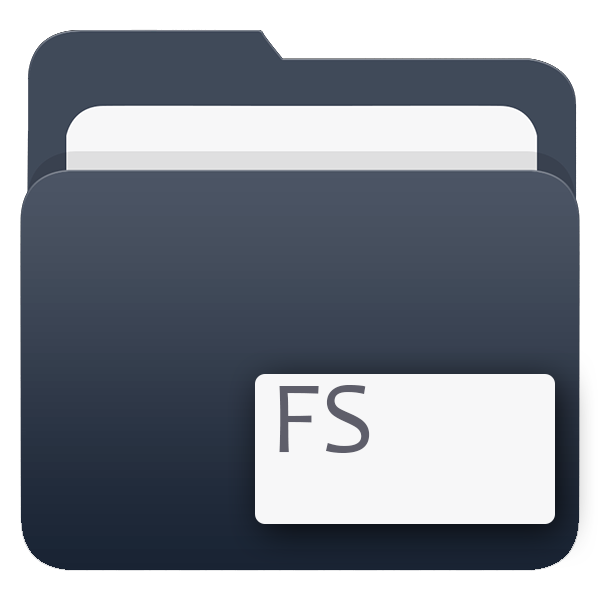
<style>
.page{position:relative;width:600px;height:600px}
.page>*{position:absolute;margin:0}
.t1{font:104px "Candara";color:#5e5e6a}
</style>
<div class="page">
<p class="t1" style="left:279px;top:385px;width:91px;height:68px">FS</p>
</div>
